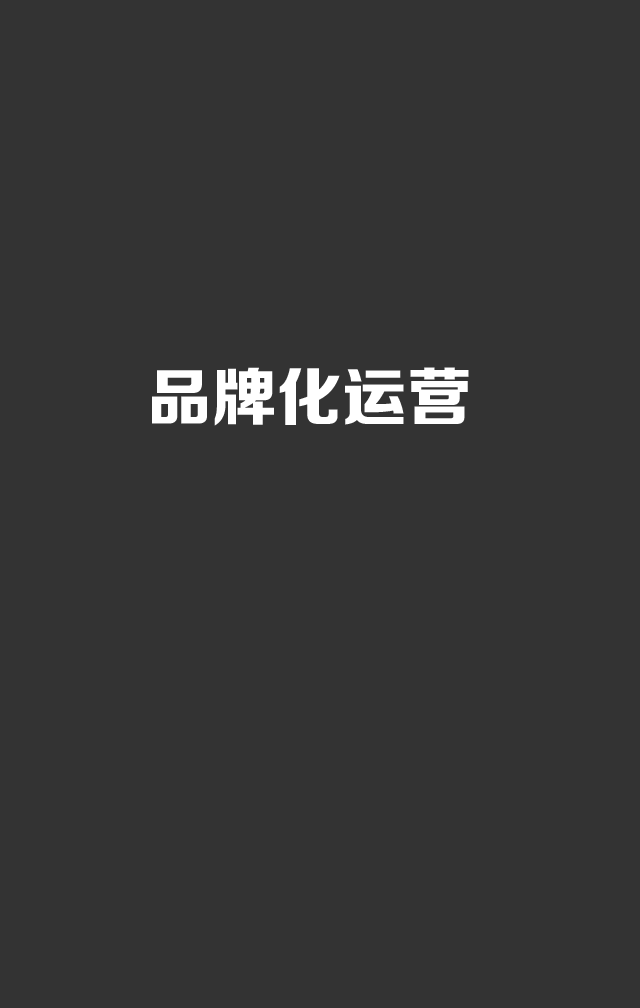
<style>
.page{position:relative;width:640px;height:1008px;background:#333333}
.page>*{position:absolute;margin:0}
.t1{font:63.6px "FZZDHJW--GB1-0";letter-spacing:0.005em;color:#ffffff;text-transform:uppercase}
</style>
<div class="page">
<p class="t1" style="left:152px;top:367px;width:317px;height:59px">品牌化运营</p>
</div>
